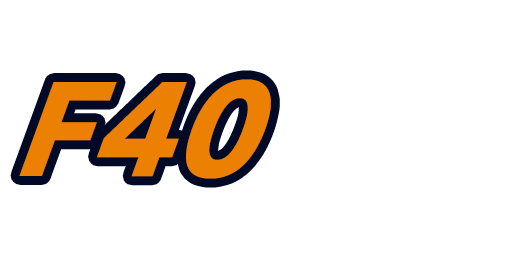
<style>
.page{position:relative;width:512px;height:256px;background:#ffffff}
.page>*{position:absolute;margin:0}
.t1{font:128px "RodinPro-EB";letter-spacing:0.001em;color:#ec8002;scale:0.94 1}
</style>
<div class="page">
<p class="t1" style="left:19px;top:79px;width:252px;height:100px">F40</p>
</div>
